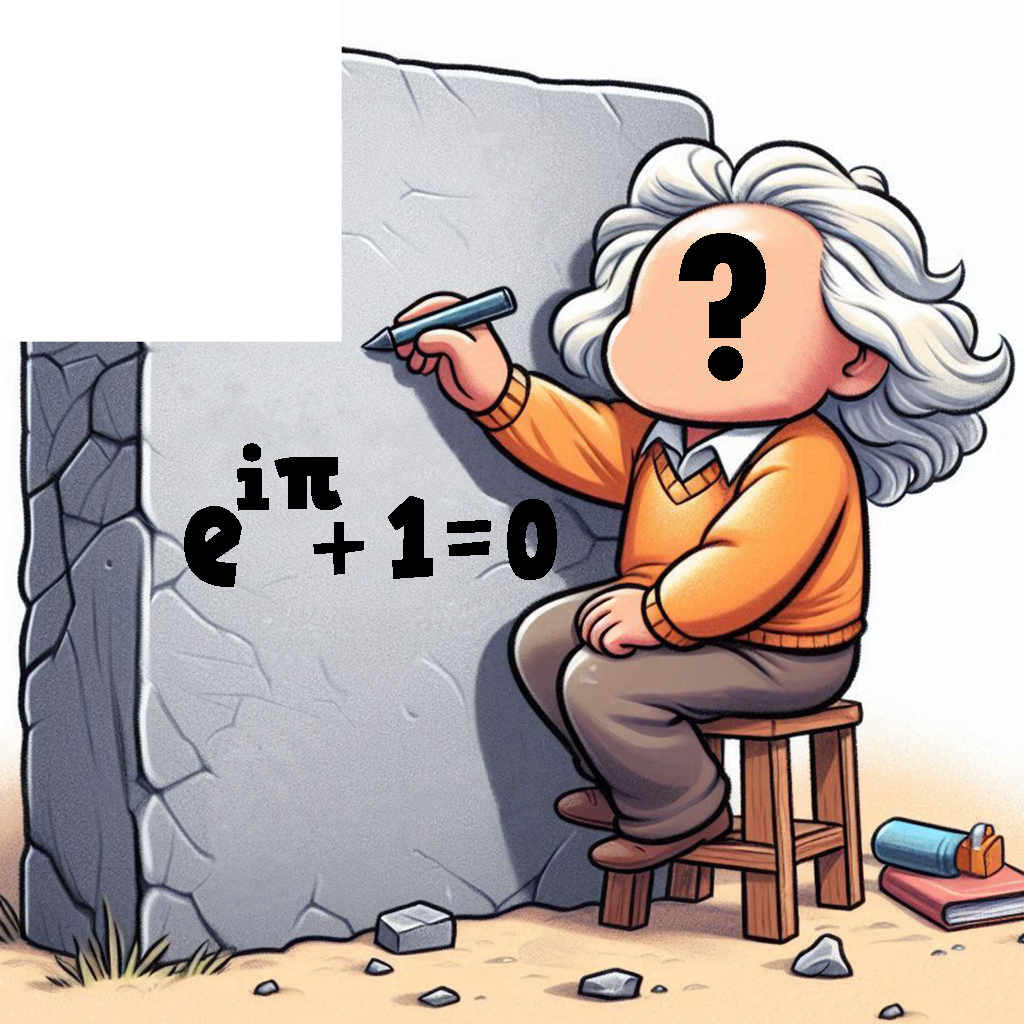
<style>
.page{position:relative;width:1024px;height:1024px}
.page>*{position:absolute;margin:0}
.t1{font:216.9px "TwCenMT-CondensedExtraBold";color:#000000}
.t2{font:86.8px "HVDComicSerifPro";color:#000000}
.t3{font:101.2px "HVDComicSerifPro";color:#000000}
.t4{font:111.4px "HVDComicSerifPro";color:#000000;scale:0.91 1}
.t5{font:151.9px "HVDComicSerifPro";color:#000000;scale:0.8 1}
.t6{font:111.4px "HVDComicSerifPro";color:#000000;scale:0.82 1}
.t7{font:91.1px "HVDComicSerifPro";color:#000000}
</style>
<div class="page">
<p class="t1" style="left:679px;top:233px;width:87px;height:148px">?</p>
<p class="t2" style="left:237px;top:443px;width:105px;height:68px">i<span class="t3">π</span></p>
<p class="t4" style="left:388px;top:496px;width:45px;height:83px">1</p>
<p class="t5" style="left:184px;top:506px;width:58px;height:81px">e</p>
<p class="t6" style="left:507px;top:499px;width:50px;height:81px">0</p>
<p class="t4" style="left:447px;top:520px;width:44px;height:36px">=</p>
<p class="t7" style="left:313px;top:522px;width:51px;height:53px">+</p>
</div>
